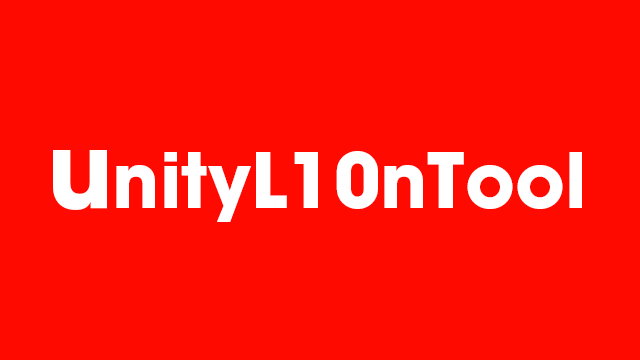
<style>
.page{position:relative;width:640px;height:360px;background:#ff0a00}
.page>*{position:absolute;margin:0}
.t1{font:104.2px "ITCAvantGardePro-Bold";color:#ffffff}
.t2{font:75px "ITCAvantGardePro-Bold";color:#ffffff}
</style>
<div class="page">
<p class="t1" style="left:53px;top:150px;width:54px;height:60px">u</p>
<p class="t2" style="left:64px;top:151px;width:518px;height:71px">UnityL10nTool</p>
</div>
